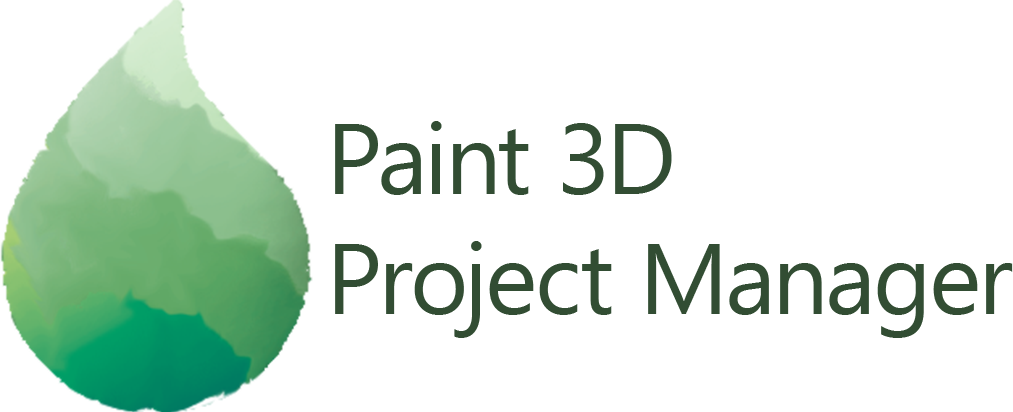
<style>
.page{position:relative;width:1013px;height:412px;background:#ffffff}
.page>*{position:absolute;margin:0}
.t1{font:100px "SegoeUI";letter-spacing:-0.01em;color:#324d33}
</style>
<div class="page">
<p class="t1" style="left:335px;top:121px;width:678px;height:217px">Paint 3D<br>Project Manager</p>
</div>
